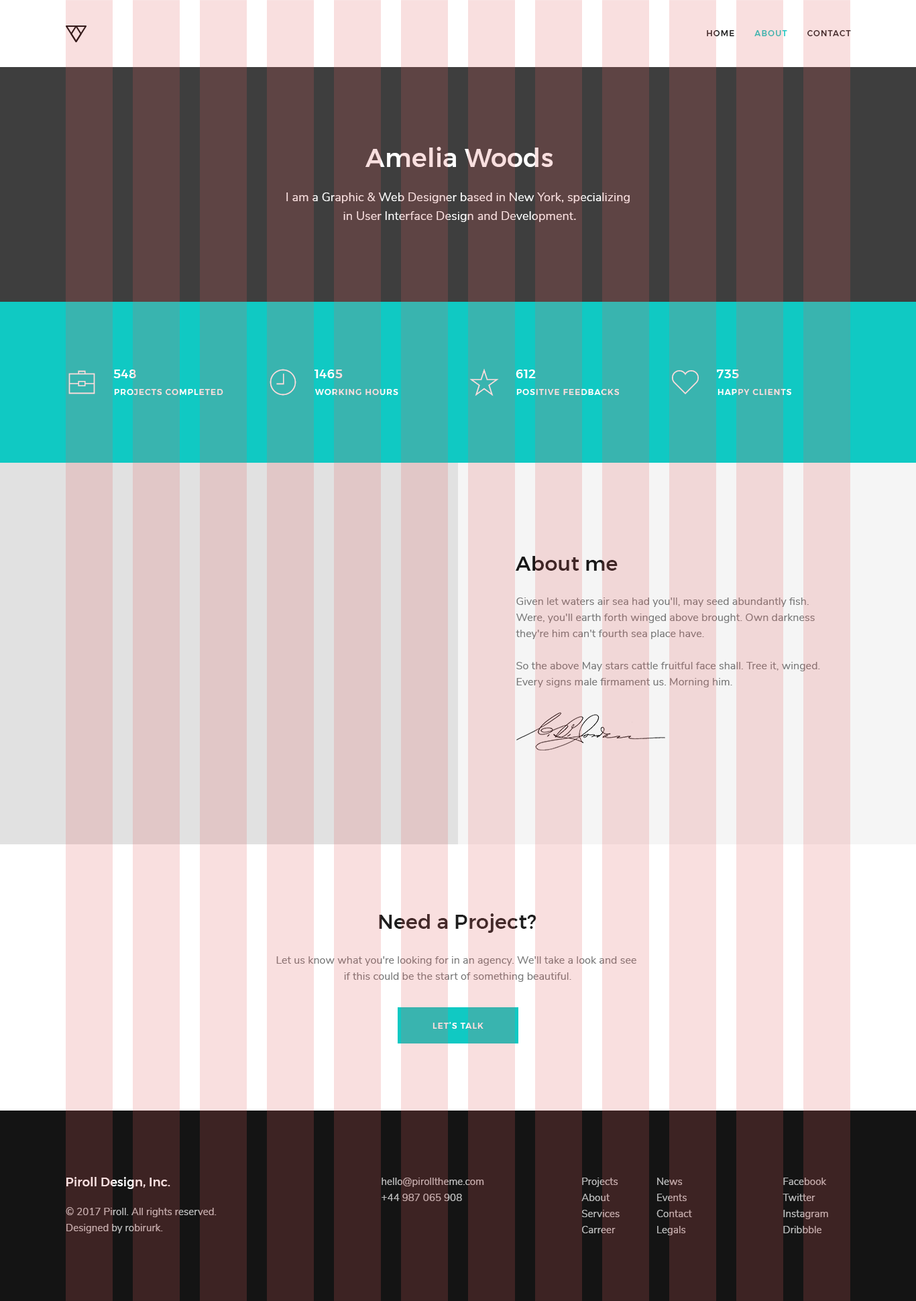
<style>
.page{position:relative;width:916px;height:1301px}
.page>*{position:absolute;margin:0}
.t1{font:8px "Montserrat-Medium";letter-spacing:0.1em;text-transform:uppercase}
.t2{font:25.5px "Montserrat-Medium";letter-spacing:0.01em;color:#f9dfdf}
.t3{font:12.1px/18.8px "NunitoSans-Regular";letter-spacing:0.005em;color:#f9dfdf}
.t4{font:12.1px "Montserrat-Medium";letter-spacing:0.03em;color:#ffffff;text-transform:uppercase}
.t5{font:20.1px "Montserrat-Medium";letter-spacing:0.01em}
.t6{font:10.7px/16.1px "NunitoSans-Regular";letter-spacing:0.005em;color:#787878}
.t7{font:8px "Montserrat-Medium";letter-spacing:0.1em;color:#f9dfdf;text-transform:uppercase}
.t8{font:12.1px "Montserrat-Medium";letter-spacing:0.01em;color:#f9dfdf}
.t9{font:10.1px/16.1px "NunitoSans-Regular";letter-spacing:0.005em;color:#bcbcbc}
</style>
<div class="page">
<p class="t1" style="left:707px;top:30px;width:144px;height:6px">home       about       contact</p>
<p class="t2" style="left:366px;top:147px;width:187px;height:20px">Amelia Woods</p>
<p class="t3" style="left:286px;top:193px;width:344px;height:29px;text-align:center">I am a Graphic &amp; Web Designer based in New York, specializing <br>in User Interface Design and Development.</p>
<p class="t4" style="left:113px;top:370px;width:23px;height:8px">548</p>
<p class="t4" style="left:315px;top:370px;width:28px;height:8px">1465</p>
<p class="t4" style="left:516px;top:370px;width:20px;height:8px">612</p>
<p class="t4" style="left:717px;top:370px;width:22px;height:8px">735</p>
<p class="t1" style="left:114px;top:389px;width:109px;height:6px">projects completed</p>
<p class="t1" style="left:315px;top:389px;width:83px;height:6px">WORKING HOURS</p>
<p class="t1" style="left:517px;top:389px;width:103px;height:6px">POSITIVE FEEDBACKS</p>
<p class="t1" style="left:718px;top:389px;width:74px;height:6px">HAPPY CLIENTS</p>
<p class="t5" style="left:516px;top:556px;width:102px;height:15px">About me</p>
<p class="t6" style="left:516px;top:598px;width:304px;height:90px">Given let waters air sea had you'll, may seed abundantly fish. <br>Were, you'll earth forth winged above brought. Own darkness <br>they're him can't fourth sea place have.<br><br>So the above May stars cattle fruitful face shall. Tree it, winged. <br>Every signs male firmament us. Morning him.</p>
<p class="t5" style="left:379px;top:914px;width:158px;height:19px">Need a Project?</p>
<p class="t6" style="left:276px;top:957px;width:361px;height:25px;text-align:center">Let us know what you're looking for in an agency. We'll take a look and see <br>if this could be the start of something beautiful.</p>
<p class="t7" style="left:433px;top:1022px;width:51px;height:7px">let’s talk</p>
<p class="t8" style="left:66px;top:1177px;width:104px;height:12px">Piroll Design, Inc.</p>
<p class="t9" style="left:382px;top:1178px;width:102px;height:23px">hello@pirolltheme.com<br>+44 987 065 908</p>
<p class="t9" style="left:582px;top:1178px;width:38px;height:56px">Projects<br>About<br>Services<br>Carreer</p>
<p class="t9" style="left:657px;top:1178px;width:35px;height:58px">News<br>Events<br>Contact<br>Legals</p>
<p class="t9" style="left:783px;top:1178px;width:45px;height:56px">Facebook<br>Twitter<br>Instagram<br>Dribbble</p>
<p class="t9" style="left:66px;top:1207px;width:151px;height:27px">© 2017 Piroll. All rights reserved.<br>Designed by robirurk.</p>
</div>
